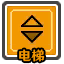
<style>
.page{position:relative;width:64px;height:64px}
.page>*{position:absolute;margin:0}
.t1{font:13px "HYWenHei-HEW";letter-spacing:0.045em;color:#f19602}
</style>
<div class="page">
<p class="t1" style="left:19px;top:49px;width:26px;height:13px">电梯</p>
</div>
